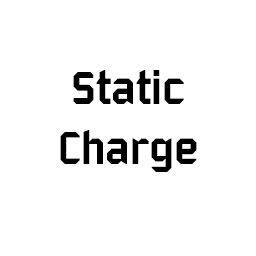
<style>
.page{position:relative;width:256px;height:256px;background:#ffffff}
.page>*{position:absolute;margin:0}
.t1{font:50px "Bombardier";color:#000000}
</style>
<div class="page">
<p class="t1" style="left:60px;top:70px;width:137px;height:102px;text-align:center">Static<br>Charge</p>
</div>
